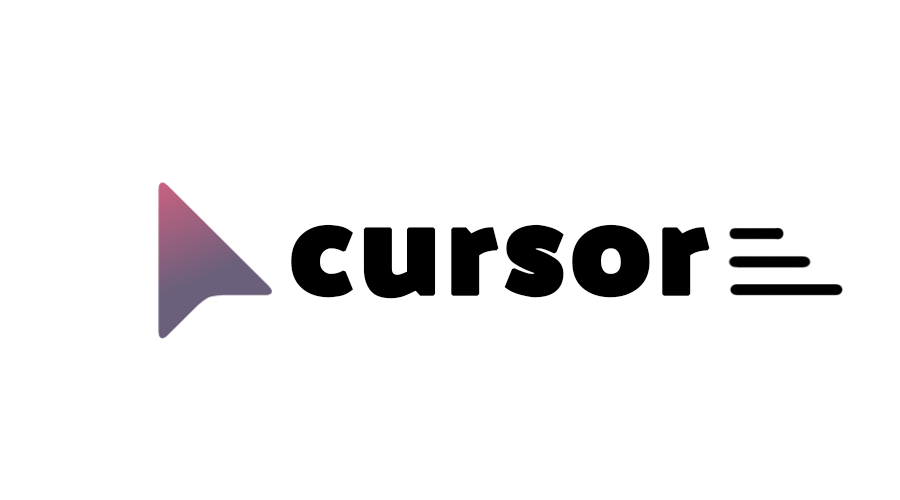
<style>
.page{position:relative;width:900px;height:500px;background:#ffffff}
.page>*{position:absolute;margin:0}
.t1{font:133.8px "PalanquinDark-Bold";letter-spacing:0.005em;color:#000000;font-weight:bold}
</style>
<div class="page">
<p class="t1" style="left:291px;top:224px;width:419px;height:75px">cursor</p>
</div>
